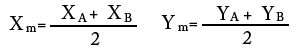
<style>
.page{position:relative;width:299px;height:50px;background:#ffffff}
.page>*{position:absolute;margin:0}
.t1{font:18.7px "ACaslonPro-Regular";color:#000000}
.t2{font:12px "ACaslonPro-Regular";color:#000000}
.t3{font:13.3px "ACaslonPro-Regular";color:#000000}
</style>
<div class="page">
<p class="t1" style="left:61px;top:5px;width:61px;height:14px">X   +  X</p>
<p class="t1" style="left:216px;top:6px;width:59px;height:14px">Y   +  Y</p>
<p class="t1" style="left:9px;top:16px;width:37px;height:14px">X   =</p>
<p class="t2" style="left:77px;top:13px;width:10px;height:9px">A</p>
<p class="t2" style="left:124px;top:13px;width:8px;height:9px">B</p>
<p class="t1" style="left:161px;top:15px;width:36px;height:14px">Y   =</p>
<p class="t2" style="left:229px;top:12px;width:10px;height:9px">A</p>
<p class="t2" style="left:276px;top:12px;width:8px;height:9px">B</p>
<p class="t3" style="left:26px;top:26px;width:10px;height:6px">m</p>
<p class="t3" style="left:178px;top:25px;width:10px;height:6px">m</p>
<p class="t1" style="left:90px;top:32px;width:10px;height:14px">2</p>
<p class="t1" style="left:242px;top:31px;width:10px;height:14px">2</p>
</div>
